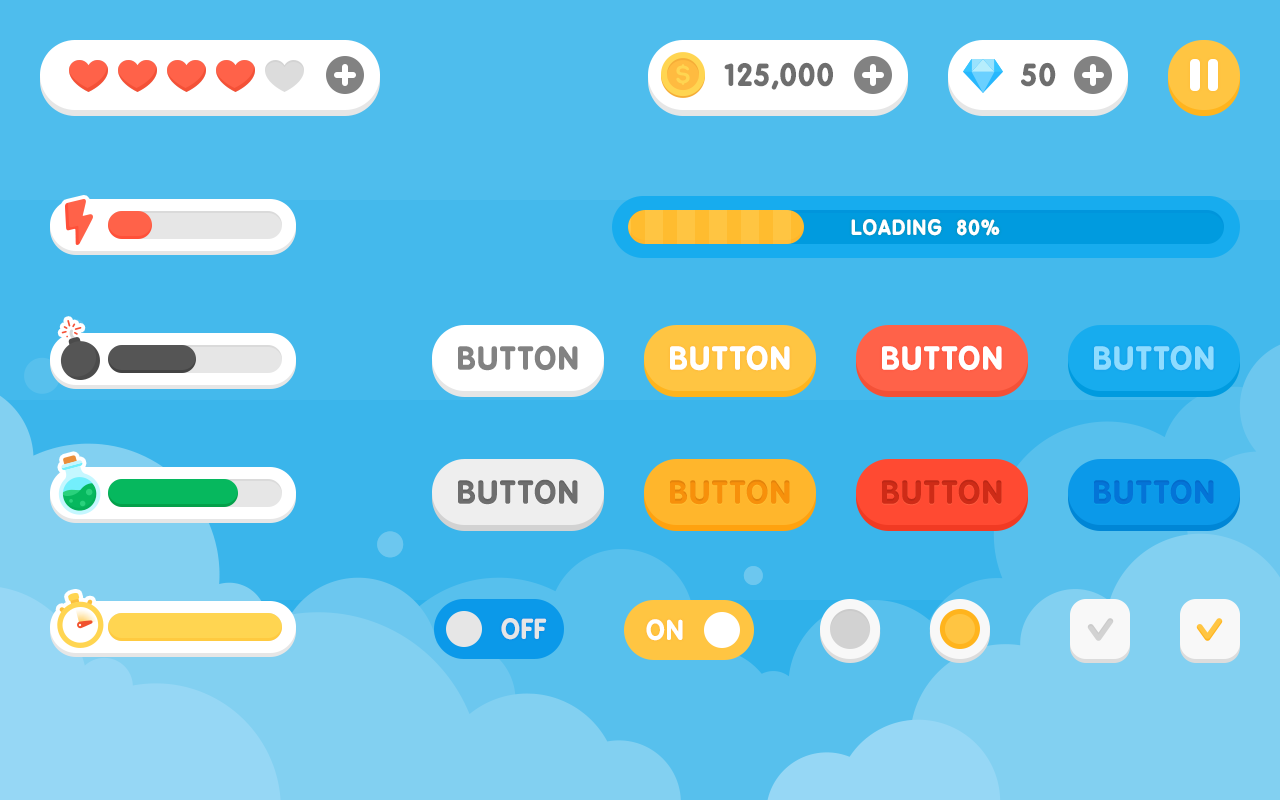
<style>
.page{position:relative;width:1280px;height:800px}
.page>*{position:absolute;margin:0}
.t1{font:30px "BPreplay-Bold";letter-spacing:0.025em;color:#6e6e6e}
.t2{font:20px "BPreplay-Bold";letter-spacing:0.05em;color:#ffffff;text-transform:uppercase}
.t3{font:20px "BPreplay-Bold";letter-spacing:0.05em;color:#ffffff}
.t4{font:30px "BPreplay-Bold";letter-spacing:0.05em;color:#828282;text-transform:uppercase}
.t5{font:30px "BPreplay-Bold";letter-spacing:0.05em;color:#ffffff;text-transform:uppercase}
.t6{font:30px "BPreplay-Bold";letter-spacing:0.05em;color:#8edcff;text-transform:uppercase}
.t7{font:30px "BPreplay-Bold";letter-spacing:0.05em;color:#6e6e6e;text-transform:uppercase}
.t8{font:30px "BPreplay-Bold";letter-spacing:0.05em;color:#f7900b;text-transform:uppercase}
.t9{font:30px "BPreplay-Bold";letter-spacing:0.05em;color:#ce2b17;text-transform:uppercase}
.t10{font:30px "BPreplay-Bold";letter-spacing:0.05em;color:#0474d7;text-transform:uppercase}
.t11{font:26.2px "BPreplay-Bold";letter-spacing:0.025em;color:#e6e6e6;text-transform:uppercase}
.t12{font:26px "BPreplay-Bold";letter-spacing:0.025em;color:#ffffff;text-transform:uppercase}
</style>
<div class="page">
<p class="t1" style="left:724px;top:62px;width:109px;height:28px">125,000</p>
<p class="t1" style="left:1021px;top:62px;width:35px;height:25px">50</p>
<p class="t2" style="left:851px;top:219px;width:149px;height:17px">loading  <span class="t3">80%</span></p>
<p class="t4" style="left:458px;top:345px;width:120px;height:26px">button</p>
<p class="t5" style="left:670px;top:345px;width:120px;height:26px">button</p>
<p class="t5" style="left:882px;top:345px;width:120px;height:26px">button</p>
<p class="t6" style="left:1094px;top:345px;width:120px;height:26px">button</p>
<p class="t7" style="left:458px;top:479px;width:120px;height:26px">button</p>
<p class="t8" style="left:670px;top:479px;width:120px;height:26px">button</p>
<p class="t9" style="left:882px;top:479px;width:120px;height:26px">button</p>
<p class="t10" style="left:1094px;top:479px;width:120px;height:26px">button</p>
<p class="t11" style="left:501px;top:618px;width:46px;height:22px">off</p>
<p class="t12" style="left:646px;top:619px;width:37px;height:22px">on</p>
</div>
